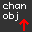
<style>
.page{position:relative;width:32px;height:32px;background:#333333}
.page>*{position:absolute;margin:0}
.t1{font:9px/10.4px "Monaco";letter-spacing:0.06em;color:#ffffff}
.t2{font:23.7px "Monaco";letter-spacing:0.06em;color:#ff0000}
</style>
<div class="page">
<p class="t1" style="left:3px;top:2px;width:23px;height:19px">chan<br>obj</p>
<p class="t2" style="left:19px;top:19px;width:10px;height:12px;rotate:-90deg">→</p>
</div>
